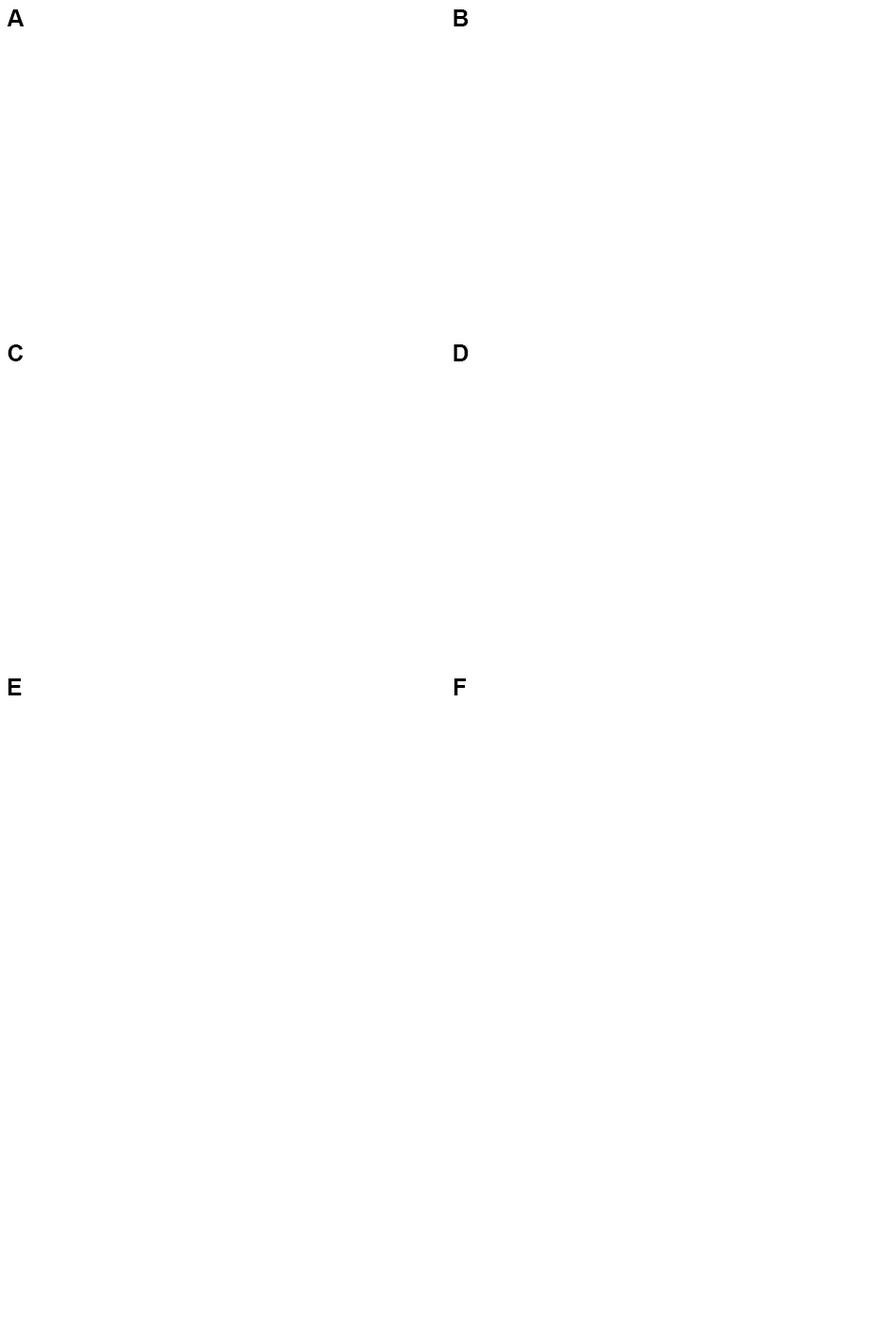
<style>
.page{position:relative;width:891px;height:1338px;background:#ffffff}
.page>*{position:absolute;margin:0}
.t1{font:23.6px "Arial-BoldMT";color:#000000}
</style>
<div class="page">
<p class="t1" style="left:7px;top:9px;width:18px;height:17px">A</p>
<p class="t1" style="left:454px;top:9px;width:15px;height:17px">B</p>
<p class="t1" style="left:8px;top:344px;width:16px;height:17px">C</p>
<p class="t1" style="left:454px;top:344px;width:15px;height:17px">D</p>
<p class="t1" style="left:8px;top:678px;width:14px;height:17px">E</p>
<p class="t1" style="left:454px;top:678px;width:13px;height:17px">F</p>
</div>
